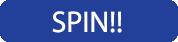
<style>
.page{position:relative;width:178px;height:42px;background:#223f99}
.page>*{position:absolute;margin:0}
.t1{font:30px "MyriadPro-Regular";color:#ffffff}
</style>
<div class="page">
<p class="t1" style="left:52px;top:11px;width:70px;height:22px">SPIN!!</p>
</div>
